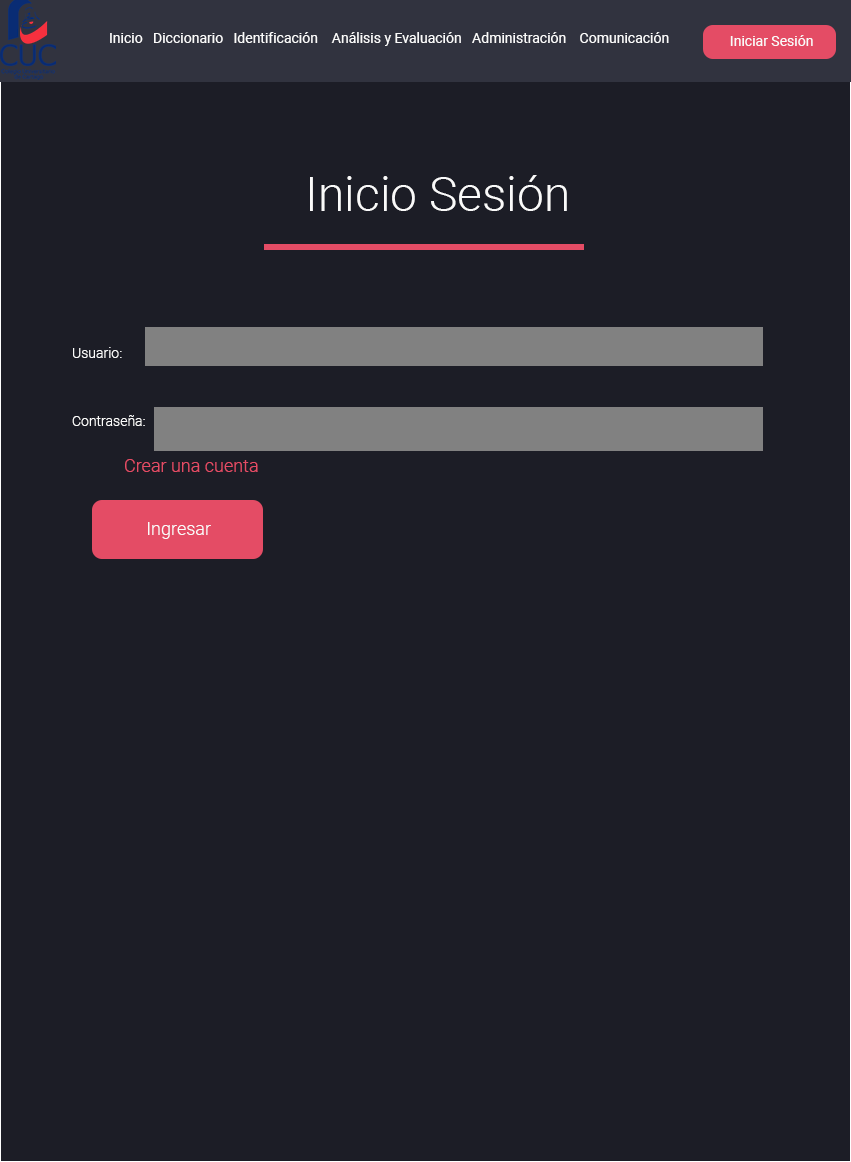
<style>
.page{position:relative;width:851px;height:1162px;background:#1c1d26}
.page>*{position:absolute;margin:0}
.t1{font:14px "Roboto-Regular";color:#fafafa}
.t2{font:48px "Roboto-Light";color:#fafafa}
.t3{font:14px "Roboto-Light";color:#fafafa}
.t4{font:18px "Roboto-Light";color:#e44c65}
.t5{font:18px "Roboto-Light";color:#fafafa}
</style>
<div class="page">
<p class="t1" style="left:110px;top:32px;width:559px;height:14px">Inicio   Diccionario   Identificación    Análisis y Evaluación   Administración   Comunicación</p>
<p class="t1" style="left:730px;top:35px;width:83px;height:11px">Iniciar Sesión</p>
<p class="t2" style="left:310px;top:175px;width:257px;height:36px">Inicio Sesión</p>
<p class="t3" style="left:73px;top:347px;width:49px;height:11px">Usuario:</p>
<p class="t3" style="left:72px;top:415px;width:73px;height:11px">Contraseña:</p>
<p class="t4" style="left:125px;top:459px;width:133px;height:13px">Crear una cuenta</p>
<p class="t5" style="left:148px;top:522px;width:63px;height:17px">Ingresar</p>
</div>
